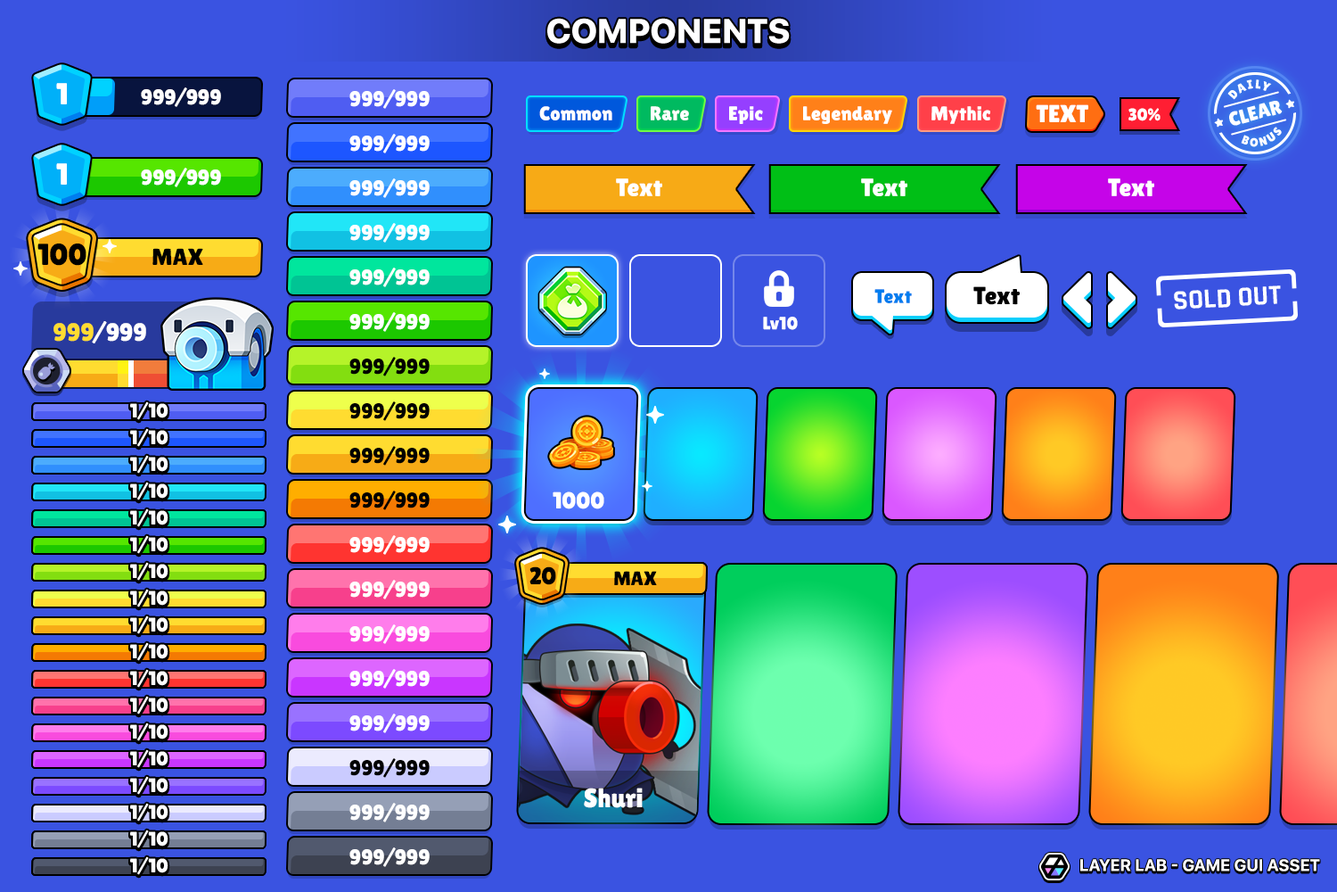
<style>
.page{position:relative;width:1337px;height:892px;background:#3a53e1}
.page>*{position:absolute;margin:0}
.t1{font:34.3px "SFUIDisplay-Heavy";color:#ffffff;text-transform:uppercase}
.t2{font:30.3px "LilitaOne";color:#ffffff;text-transform:uppercase}
.t3{font:21.4px "LilitaOne";color:#ffffff;text-transform:uppercase}
.t4{font:12.5px "LilitaOne";letter-spacing:0.1em;color:#ffffff;text-transform:uppercase}
.t5{font:19.9px "LilitaOne";color:#ffffff;text-transform:uppercase}
.t6{font:11px "HUMeninblack140";color:#ffffff;text-transform:uppercase}
.t7{font:19.6px "LilitaOne";color:#ffffff}
.t8{font:24.6px "LilitaOne";color:#ffffff;text-transform:uppercase}
.t9{font:16.9px "LilitaOne";color:#ffffff;text-transform:uppercase}
.t10{font:12.1px "LilitaOne";letter-spacing:0.2em;color:#ffffff;text-transform:uppercase}
.t11{font:25px "LilitaOne";color:#ffffff}
.t12{font:30.3px "LilitaOne";color:#000000;text-transform:uppercase}
.t13{font:23.2px "LilitaOne";color:#000000;text-transform:uppercase}
.t14{font:19.6px "LilitaOne";color:#007def}
.t15{font:25px "LilitaOne";color:#000000}
.t16{font:27.8px "Rajdhani-Bold";color:#ffffff;text-transform:uppercase}
.t17{font:17.8px "LilitaOne";color:#ffffff}
.t18{font:25px "LilitaOne";color:#ffffff;text-transform:uppercase}
.t19{font:25px "LilitaOne";color:#ffdc30;text-transform:uppercase}
.t20{font:21.4px "LilitaOne";color:#000000;text-transform:uppercase}
.t21{font:19.6px "LilitaOne";color:#ffffff;text-transform:uppercase}
.t22{font:23.2px "LilitaOne";color:#ffffff;text-transform:uppercase}
.t23{font:24.3px "LilitaOne";color:#000000;text-transform:uppercase}
.t24{font:19.6px "LilitaOne";color:#000000;text-transform:uppercase}
.t25{font:26.7px "LilitaOne";color:#ffffff}
.t26{font:16.5px "SFUIDisplay-Bold";letter-spacing:0.02em;color:#ffffff;text-transform:uppercase}
</style>
<div class="page">
<p class="t1" style="left:547px;top:18px;width:243px;height:26px">Components</p>
<p class="t2" style="left:56px;top:83px;width:11px;height:21px">1</p>
<p class="t3" style="left:141px;top:87px;width:80px;height:20px">999/999</p>
<p class="t3" style="left:350px;top:89px;width:80px;height:20px">999/999</p>
<p class="t4" style="left:1228px;top:79px;width:44px;height:21px;rotate:-14deg">daily</p>
<p class="t5" style="left:1214px;top:99px;width:81px;height:28px;rotate:-15deg"><span class="t6">★   </span>clear   <span class="t6">★</span></p>
<p class="t7" style="left:539px;top:106px;width:74px;height:14px">Common</p>
<p class="t7" style="left:651px;top:106px;width:38px;height:14px">Rare</p>
<p class="t7" style="left:729px;top:106px;width:34px;height:18px">Epic</p>
<p class="t7" style="left:803px;top:106px;width:89px;height:18px">Legendary</p>
<p class="t7" style="left:932px;top:106px;width:59px;height:18px">Mythic</p>
<p class="t8" style="left:1036px;top:104px;width:53px;height:18px">Text</p>
<p class="t9" style="left:1129px;top:108px;width:32px;height:13px">30%</p>
<p class="t3" style="left:350px;top:134px;width:80px;height:19px">999/999</p>
<p class="t10" style="left:1241px;top:127px;width:41px;height:20px;rotate:-14deg">bonus</p>
<p class="t2" style="left:56px;top:163px;width:11px;height:22px">1</p>
<p class="t3" style="left:141px;top:168px;width:80px;height:19px">999/999</p>
<p class="t3" style="left:350px;top:178px;width:80px;height:20px">999/999</p>
<p class="t11" style="left:616px;top:178px;width:46px;height:18px">Text</p>
<p class="t11" style="left:861px;top:178px;width:47px;height:18px">Text</p>
<p class="t11" style="left:1108px;top:178px;width:47px;height:18px">Text</p>
<p class="t3" style="left:350px;top:223px;width:80px;height:20px">999/999</p>
<p class="t12" style="left:37px;top:243px;width:49px;height:23px">100</p>
<p class="t13" style="left:152px;top:248px;width:51px;height:17px">Max</p>
<p class="t3" style="left:350px;top:267px;width:80px;height:20px">999/999</p>
<p class="t14" style="left:875px;top:289px;width:37px;height:14px">Text</p>
<p class="t15" style="left:974px;top:286px;width:46px;height:19px">Text</p>
<p class="t16" style="left:1174px;top:285px;width:107px;height:24px;rotate:-3deg">sold out</p>
<p class="t3" style="left:350px;top:312px;width:80px;height:20px">999/999</p>
<p class="t17" style="left:763px;top:317px;width:35px;height:13px">Lv10</p>
<p class="t18" style="left:53px;top:321px;width:93px;height:22px"><span class="t19">999</span>/999</p>
<p class="t20" style="left:350px;top:357px;width:80px;height:19px">999/999</p>
<p class="t21" style="left:130px;top:401px;width:39px;height:19px">1/10</p>
<p class="t20" style="left:350px;top:401px;width:80px;height:20px">999/999</p>
<p class="t21" style="left:130px;top:428px;width:39px;height:19px">1/10</p>
<p class="t20" style="left:350px;top:446px;width:80px;height:19px">999/999</p>
<p class="t21" style="left:130px;top:455px;width:39px;height:18px">1/10</p>
<p class="t21" style="left:130px;top:481px;width:39px;height:19px">1/10</p>
<p class="t20" style="left:350px;top:490px;width:80px;height:20px">999/999</p>
<p class="t22" style="left:553px;top:491px;width:52px;height:18px">1000</p>
<p class="t21" style="left:130px;top:508px;width:39px;height:19px">1/10</p>
<p class="t21" style="left:130px;top:535px;width:39px;height:19px">1/10</p>
<p class="t3" style="left:350px;top:535px;width:80px;height:20px">999/999</p>
<p class="t21" style="left:130px;top:562px;width:39px;height:18px">1/10</p>
<p class="t23" style="left:530px;top:566px;width:26px;height:19px">20</p>
<p class="t3" style="left:350px;top:580px;width:80px;height:19px">999/999</p>
<p class="t24" style="left:614px;top:571px;width:43px;height:14px">Max</p>
<p class="t21" style="left:130px;top:588px;width:39px;height:19px">1/10</p>
<p class="t21" style="left:130px;top:615px;width:39px;height:19px">1/10</p>
<p class="t3" style="left:350px;top:624px;width:80px;height:20px">999/999</p>
<p class="t21" style="left:130px;top:642px;width:39px;height:19px">1/10</p>
<p class="t21" style="left:130px;top:669px;width:39px;height:18px">1/10</p>
<p class="t3" style="left:350px;top:669px;width:80px;height:19px">999/999</p>
<p class="t21" style="left:130px;top:695px;width:39px;height:19px">1/10</p>
<p class="t3" style="left:350px;top:713px;width:80px;height:20px">999/999</p>
<p class="t21" style="left:130px;top:722px;width:39px;height:19px">1/10</p>
<p class="t21" style="left:130px;top:749px;width:39px;height:19px">1/10</p>
<p class="t20" style="left:350px;top:758px;width:80px;height:19px">999/999</p>
<p class="t21" style="left:130px;top:776px;width:39px;height:18px">1/10</p>
<p class="t25" style="left:584px;top:787px;width:59px;height:21px">Shuri</p>
<p class="t21" style="left:130px;top:802px;width:39px;height:19px">1/10</p>
<p class="t3" style="left:350px;top:802px;width:80px;height:20px">999/999</p>
<p class="t21" style="left:130px;top:829px;width:39px;height:19px">1/10</p>
<p class="t21" style="left:130px;top:856px;width:39px;height:19px">1/10</p>
<p class="t3" style="left:350px;top:847px;width:80px;height:20px">999/999</p>
<p class="t26" style="left:1081px;top:859px;width:239px;height:12px">Layer Lab - Game GUI Asset</p>
</div>
